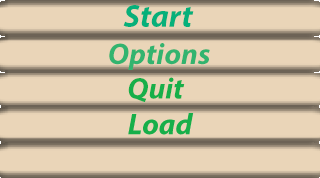
<style>
.page{position:relative;width:320px;height:178px;background:#ead5b8}
.page>*{position:absolute;margin:0}
.t1{font:32px "MyriadPro-BoldIt";color:#06b07a}
.t2{font:30px "MyriadPro-BoldIt";color:#32b46f}
.t3{font:30px "MyriadPro-BoldIt";color:#17af49}
</style>
<div class="page">
<p class="t1" style="left:123px;top:5px;width:71px;height:22px">Start</p>
<p class="t2" style="left:109px;top:43px;width:101px;height:27px">Options</p>
<p class="t3" style="left:128px;top:77px;width:57px;height:25px">Quit</p>
</div>
